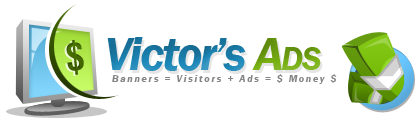
<style>
.page{position:relative;width:420px;height:122px;background:#ffffff}
.page>*{position:absolute;margin:0}
.t1{font:48.2px "FranklinGothic-DemiItalic";letter-spacing:-0.05em;color:#1c88b9}
.t2{font:48.2px "FranklinGothic-DemiItalic";letter-spacing:-0.05em;color:#78b012}
.t3{font:33.7px "FranklinGothic-DemiItalic";letter-spacing:-0.05em;color:#78b012;text-transform:uppercase}
.t4{font:9.6px "FranklinGothic-DemiItalic";letter-spacing:0.2em;color:#848484}
</style>
<div class="page">
<p class="t1" style="left:107px;top:37px;width:214px;height:34px">Victor’s <span class="t2">A</span><span class="t3">ds</span></p>
<p class="t4" style="left:112px;top:74px;width:225px;height:10px">Banners = Visitors + Ads = $ Money $</p>
</div>
